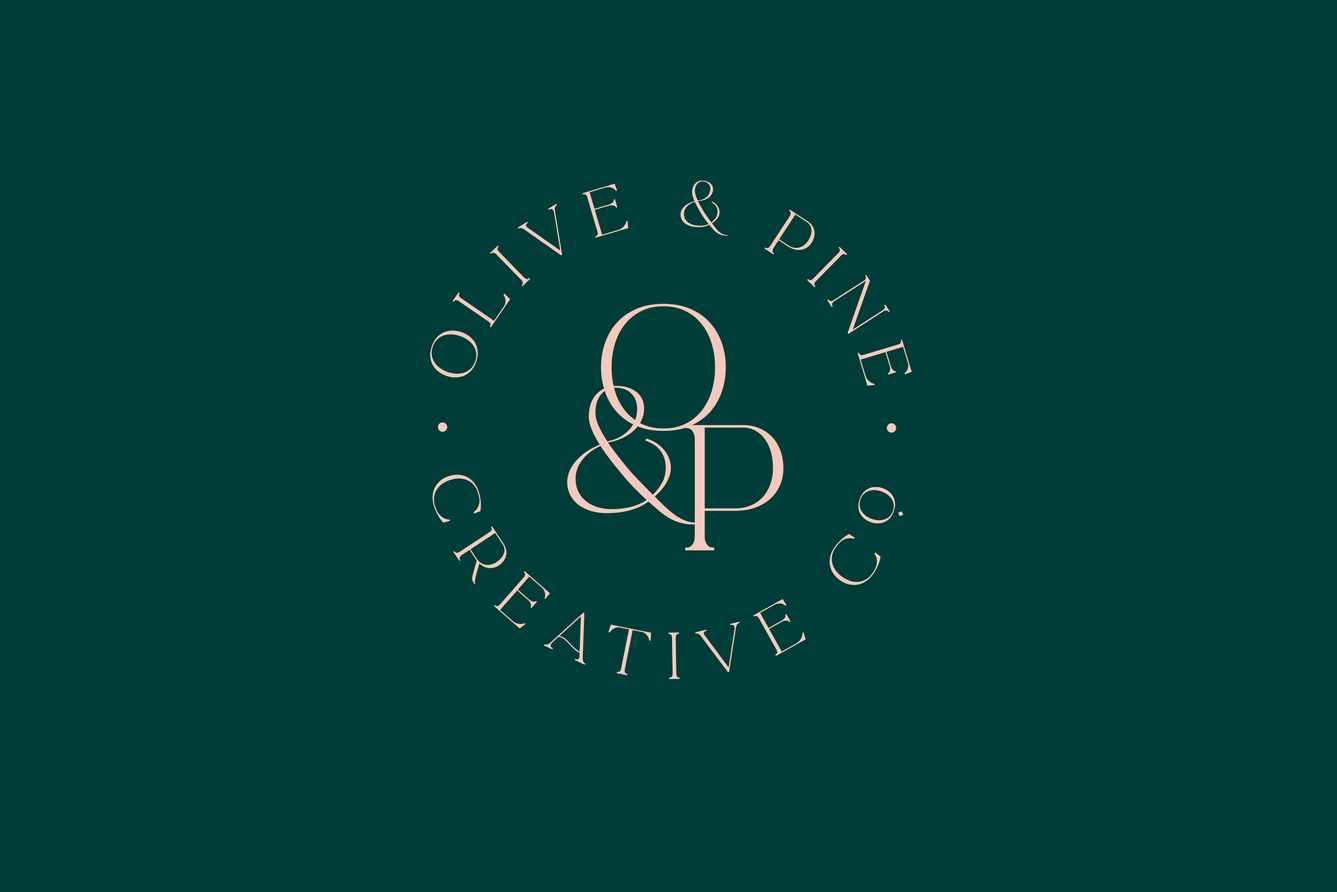
<style>
.page{position:relative;width:1337px;height:892px;background:#003d38}
.page>*{position:absolute;margin:0}
.t1{font:57.7px "LaLuxesSerif";letter-spacing:0.2em;color:#f4c9bd}
.t2{font:156.6px "LaLuxesSerif";color:#f4c9bd}
</style>
<div class="page">
<p class="t1" style="left:430px;top:181px;width:482px;height:205px;rotate:75deg">olive &amp; pine</p>
<p class="t2" style="left:601px;top:304px;width:125px;height:127px">o</p>
<p class="t2" style="left:567px;top:386px;width:135px;height:138px">&amp;</p>
<p class="t2" style="left:685px;top:425px;width:99px;height:125px">p</p>
<p class="t1" style="left:432px;top:474px;width:472px;height:205px;rotate:-111deg">creative co</p>
</div>
